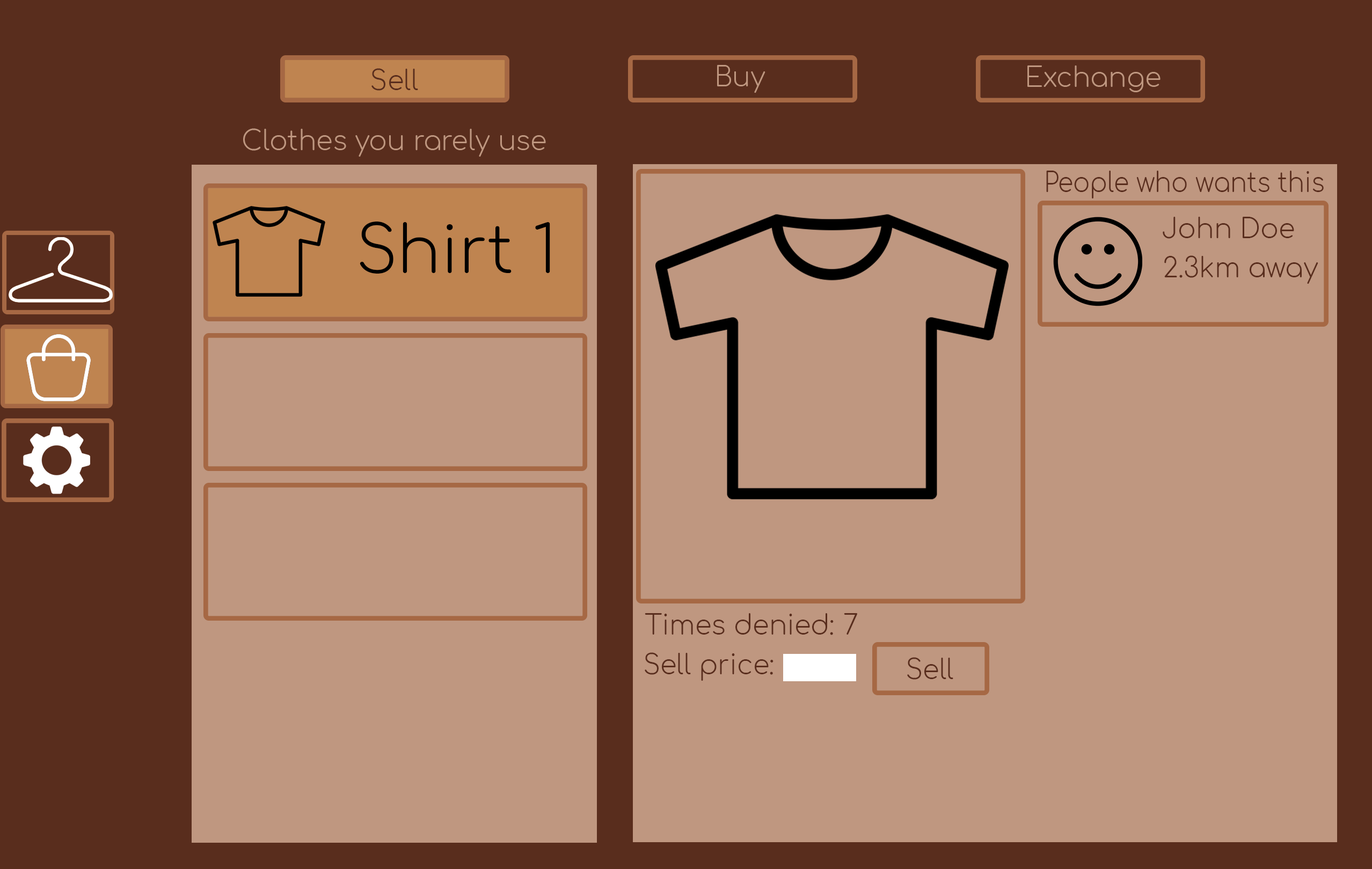
<style>
.page{position:relative;width:1372px;height:869px;background:#bf9780}
.page>*{position:absolute;margin:0}
.t1{font:26.8px "Comfortaa-Light";color:#bf9780}
.t2{font:26.8px "Comfortaa-Light";color:#592d1d}
.t3{font:26.8px "Comfortaa-Light";color:#592d1d;scale:0.93 1}
</style>
<div class="page">
<p class="t1" style="left:717px;top:65px;width:48px;height:28px">Buy</p>
<p class="t1" style="left:1027px;top:65px;width:133px;height:27px">Exchange</p>
<p class="t2" style="left:371px;top:68px;width:47px;height:23px">Sell</p>
<p class="t1" style="left:243px;top:128px;width:303px;height:29px">Clothes you rarely use</p>
<p class="t3" style="left:1046px;top:171px;width:277px;height:28px">People who wants this</p>
<p class="t2" style="left:1162px;top:217px;width:132px;height:22px">John Doe</p>
<p class="t2" style="left:1164px;top:255px;width:154px;height:29px">2.3km away</p>
<p class="t2" style="left:644px;top:613px;width:213px;height:22px">Times denied: 7</p>
<p class="t2" style="left:644px;top:653px;width:129px;height:28px">Sell price:</p>
</div>
